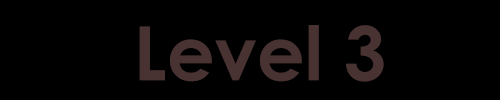
<style>
.page{position:relative;width:500px;height:100px;background:#000000}
.page>*{position:absolute;margin:0}
.t1{font:75px "CenturyGothic-Bold";color:#493232}
</style>
<div class="page">
<p class="t1" style="left:139px;top:25px;width:245px;height:57px">Level 3</p>
</div>
